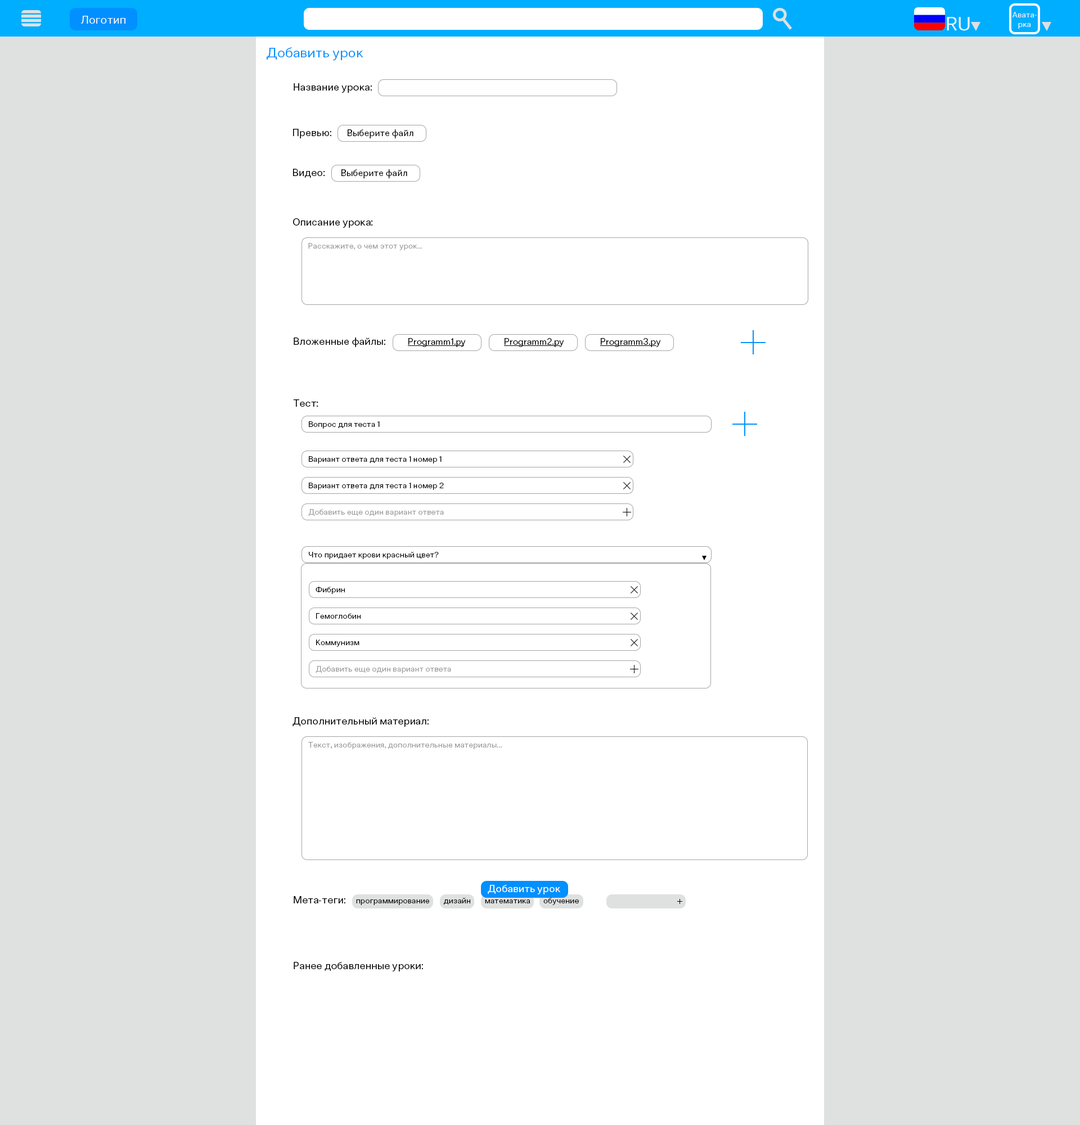
<style>
.page{position:relative;width:1080px;height:1125px;background:#ffffff}
.page>*{position:absolute;margin:0}
.t1{font:11.2px "ClinicaPro-Regular";color:#ffffff}
.t2{font:19.1px "ClinicaPro-Regular";color:#ffffff}
.t3{font:7.9px "ClinicaPro-Regular";color:#ffffff}
.t4{font:13.5px "ClinicaPro-Regular";color:#0090ff}
.t5{font:10.1px "ClinicaPro-Regular";color:#000000}
.t6{font:9px "ClinicaPro-Regular";color:#000000}
.t7{font:7.9px "ClinicaPro-Regular";color:#9a9a9a}
.t8{font:7.9px "ClinicaPro-Regular";color:#000000}
.t9{font:7.9px "ClinicaPro-Regular";color:#010101}
.t10{font:10.1px "ClinicaPro-Regular";color:#ffffff}
</style>
<div class="page">
<p class="t1" style="left:81px;top:16px;width:44px;height:8px">Логотип</p>
<p class="t2" style="left:947px;top:17px;width:23px;height:14px">RU</p>
<p class="t3" style="left:1012px;top:12px;width:25px;height:17px;text-align:center">Авата-<br>рка</p>
<p class="t4" style="left:267px;top:47px;width:96px;height:14px">Добавить урок</p>
<p class="t5" style="left:294px;top:83px;width:78px;height:10px">Название урока:</p>
<p class="t5" style="left:293px;top:129px;width:38px;height:9px">Превью:</p>
<p class="t6" style="left:348px;top:129px;width:65px;height:9px">Выберите файл</p>
<p class="t5" style="left:293px;top:169px;width:32px;height:9px">Видео:</p>
<p class="t6" style="left:341px;top:169px;width:66px;height:9px">Выберите файл</p>
<p class="t5" style="left:293px;top:218px;width:79px;height:10px">Описание урока:</p>
<p class="t7" style="left:308px;top:243px;width:114px;height:7px">Расскажите, о чем этот урок...</p>
<p class="t5" style="left:294px;top:338px;width:91px;height:9px">Вложенные файлы:</p>
<p class="t6" style="left:408px;top:338px;width:58px;height:9px">Programm1.py</p>
<p class="t6" style="left:505px;top:338px;width:59px;height:9px">Programm2.py</p>
<p class="t6" style="left:601px;top:338px;width:60px;height:9px">Programm3.py</p>
<p class="t5" style="left:293px;top:399px;width:25px;height:8px">Тест:</p>
<p class="t8" style="left:309px;top:421px;width:71px;height:8px">Вопрос для теста 1</p>
<p class="t8" style="left:309px;top:456px;width:133px;height:8px">Вариант ответа для теста 1 номер 1</p>
<p class="t8" style="left:309px;top:483px;width:135px;height:7px">Вариант ответа для теста 1 номер 2</p>
<p class="t7" style="left:308px;top:509px;width:136px;height:7px">Добавить еще один вариант ответа</p>
<p class="t8" style="left:309px;top:552px;width:130px;height:7px">Что придает крови красный цвет?</p>
<p class="t9" style="left:316px;top:587px;width:29px;height:7px">Фибрин</p>
<p class="t8" style="left:316px;top:613px;width:45px;height:6px">Гемоглобин</p>
<p class="t8" style="left:316px;top:640px;width:43px;height:7px">Коммунизм</p>
<p class="t7" style="left:316px;top:666px;width:135px;height:7px">Добавить еще один вариант ответа</p>
<p class="t5" style="left:292px;top:717px;width:137px;height:10px">Дополнительный материал:</p>
<p class="t7" style="left:308px;top:742px;width:194px;height:7px">Текст, изображения, дополнительные материалы...</p>
<p class="t10" style="left:488px;top:885px;width:72px;height:9px">Добавить урок</p>
<p class="t5" style="left:294px;top:896px;width:51px;height:7px">Мета-теги:</p>
<p class="t8" style="left:356px;top:899px;width:73px;height:6px">программирование</p>
<p class="t8" style="left:444px;top:898px;width:26px;height:7px">дизайн</p>
<p class="t8" style="left:485px;top:899px;width:45px;height:4px">математика</p>
<p class="t8" style="left:543px;top:898px;width:36px;height:7px">обучение</p>
<p class="t5" style="left:294px;top:962px;width:129px;height:9px">Ранее добавленные уроки:</p>
</div>
